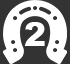
<style>
.page{position:relative;width:70px;height:64px;background:#ffffff}
.page>*{position:absolute;margin:0}
.t1{font:33.3px "Arial-Black";color:#ffffff}
</style>
<div class="page">
<p class="t1" style="left:24px;top:22px;width:21px;height:24px">2</p>
</div>
